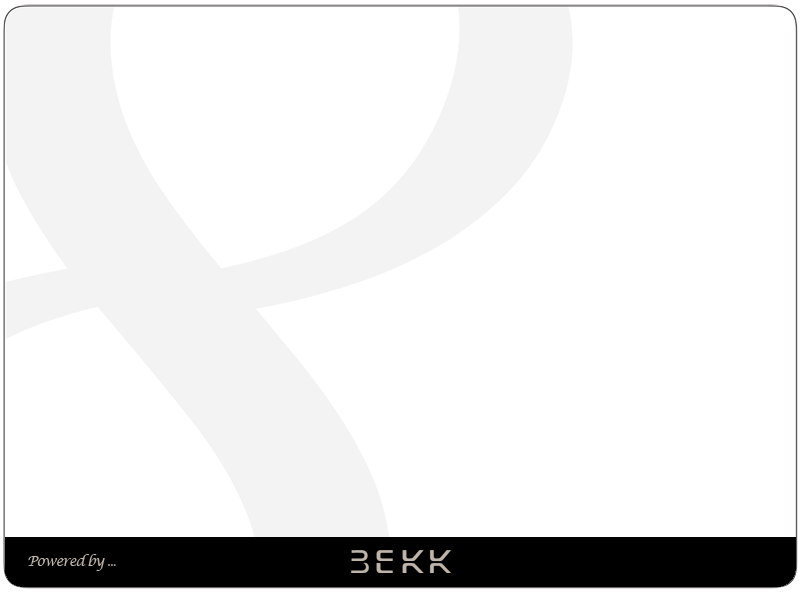
<style>
.page{position:relative;width:800px;height:600px;background:#ffffff}
.page>*{position:absolute;margin:0}
.t1{font:14px "LucidaCalligraphy-Italic";letter-spacing:-0.08em;color:#beb4a9}
</style>
<div class="page">
<p class="t1" style="left:28px;top:554px;width:88px;height:17px">Powered by ...</p>
</div>
